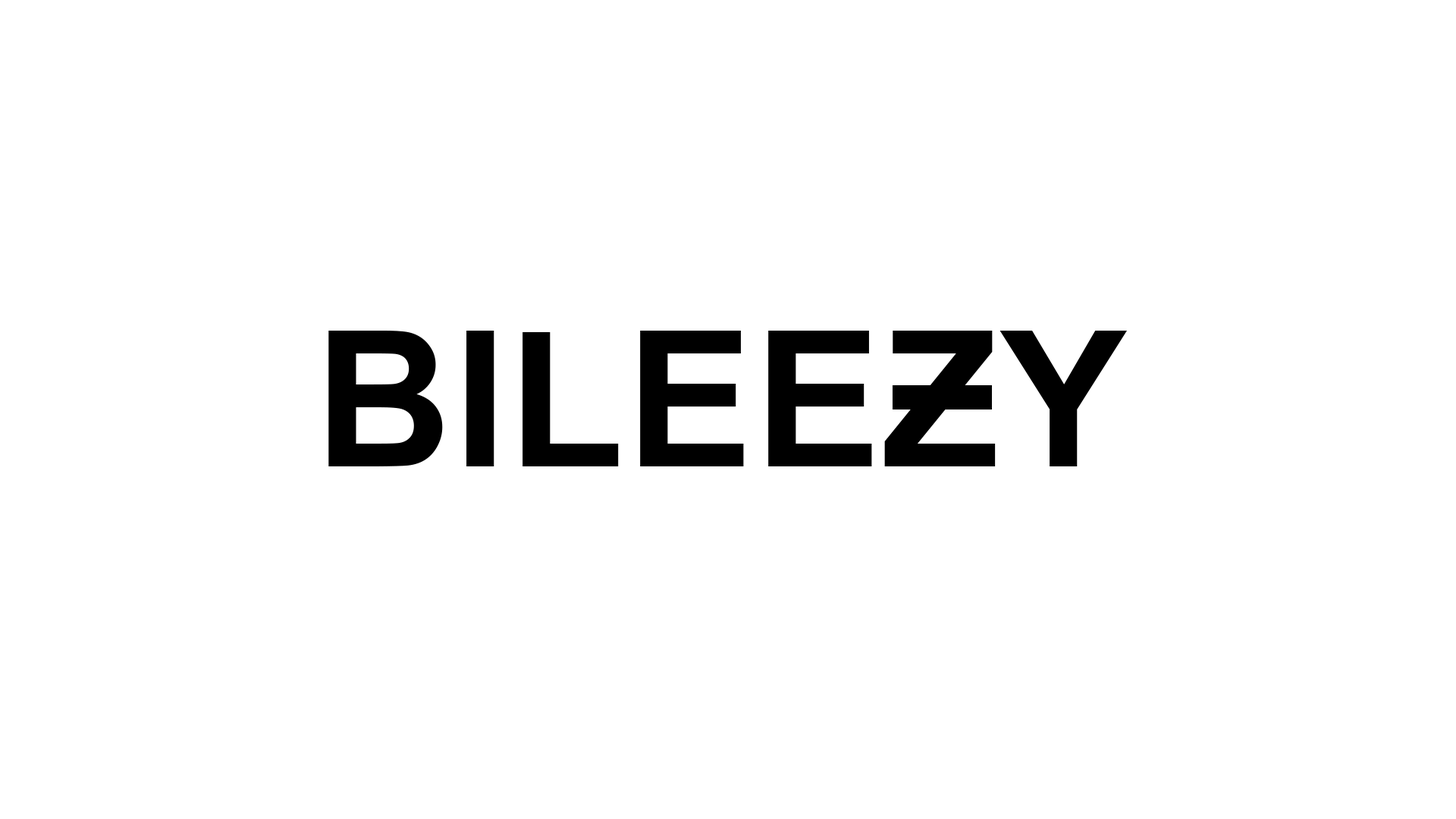
<style>
.page{position:relative;width:1456px;height:819px;background:#ffffff}
.page>*{position:absolute;margin:0}
.t1{font:189.6px "Arial-BoldMT";letter-spacing:0.01em;color:#000000}
</style>
<div class="page">
<p class="t1" style="left:328px;top:331px;width:799px;height:135px">BILEEZY</p>
</div>
